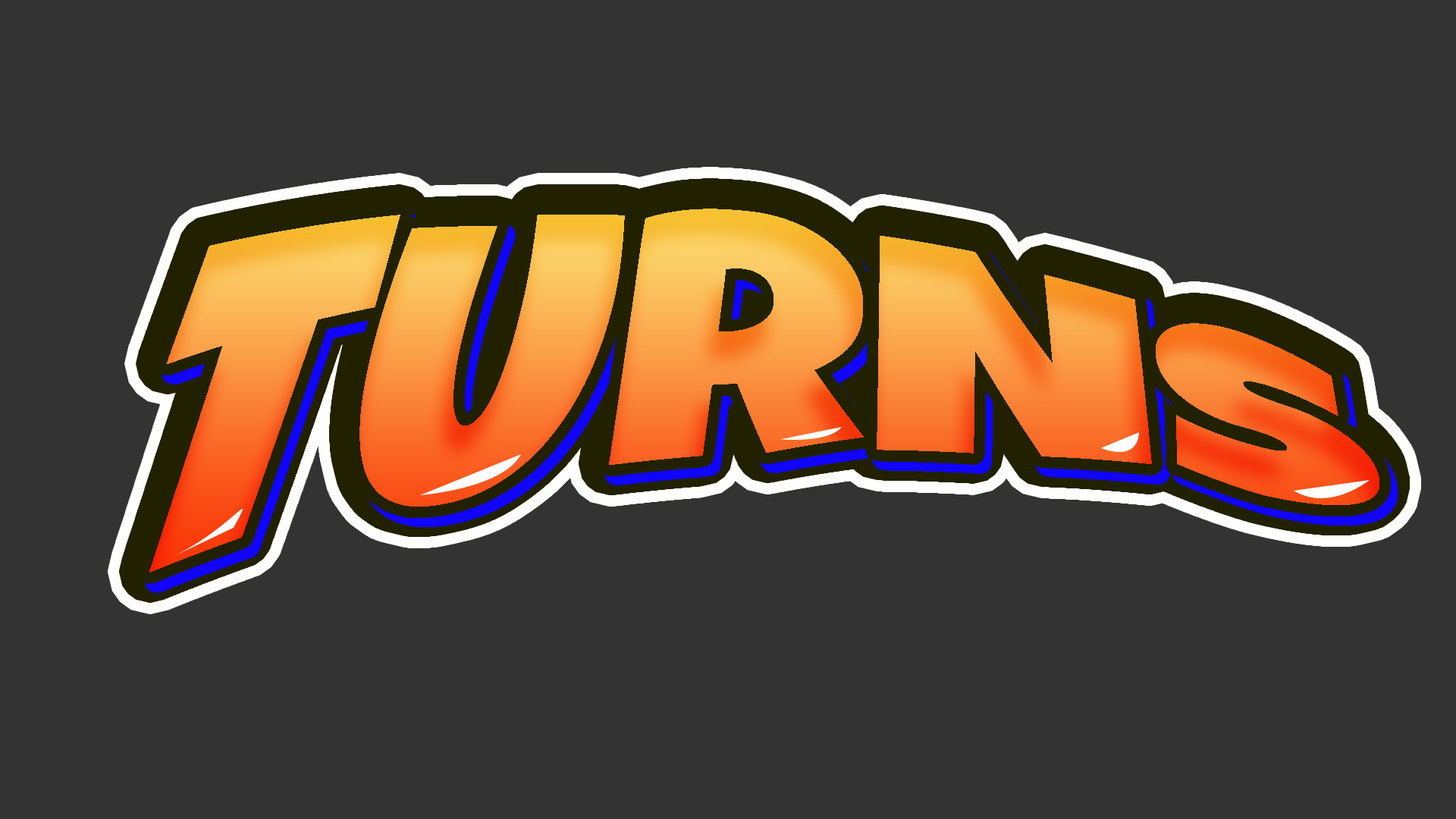
<style>
.page{position:relative;width:1456px;height:819px;background:#333333}
.page>*{position:absolute;margin:0}
.t1{font:379.2px "LuckiestGuy-Regular"}
</style>
<div class="page">
<p class="t1" style="left:149px;top:209px;width:1230px;height:364px">TURNS</p>
<p class="t1" style="left:149px;top:209px;width:1230px;height:364px">TURNS</p>
<p class="t1" style="left:156px;top:218px;width:1230px;height:364px">TURNS</p>
</div>
